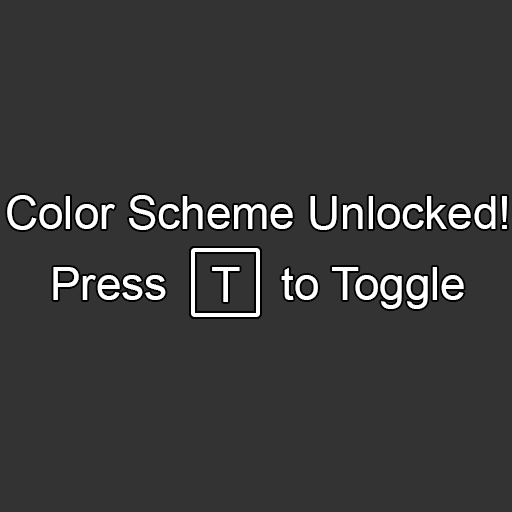
<style>
.page{position:relative;width:512px;height:512px;background:#333333}
.page>*{position:absolute;margin:0}
.t1{font:45.8px/71.8px "ArialMT";color:#ffffff}
.t2{font:47.6px "ArialMT";color:#ffffff}
</style>
<div class="page">
<p class="t1" style="left:7px;top:195px;width:500px;height:114px;text-align:center">Color Scheme Unlocked!<br>Press         to Toggle</p>
<p class="t2" style="left:212px;top:267px;width:28px;height:35px">T</p>
</div>
